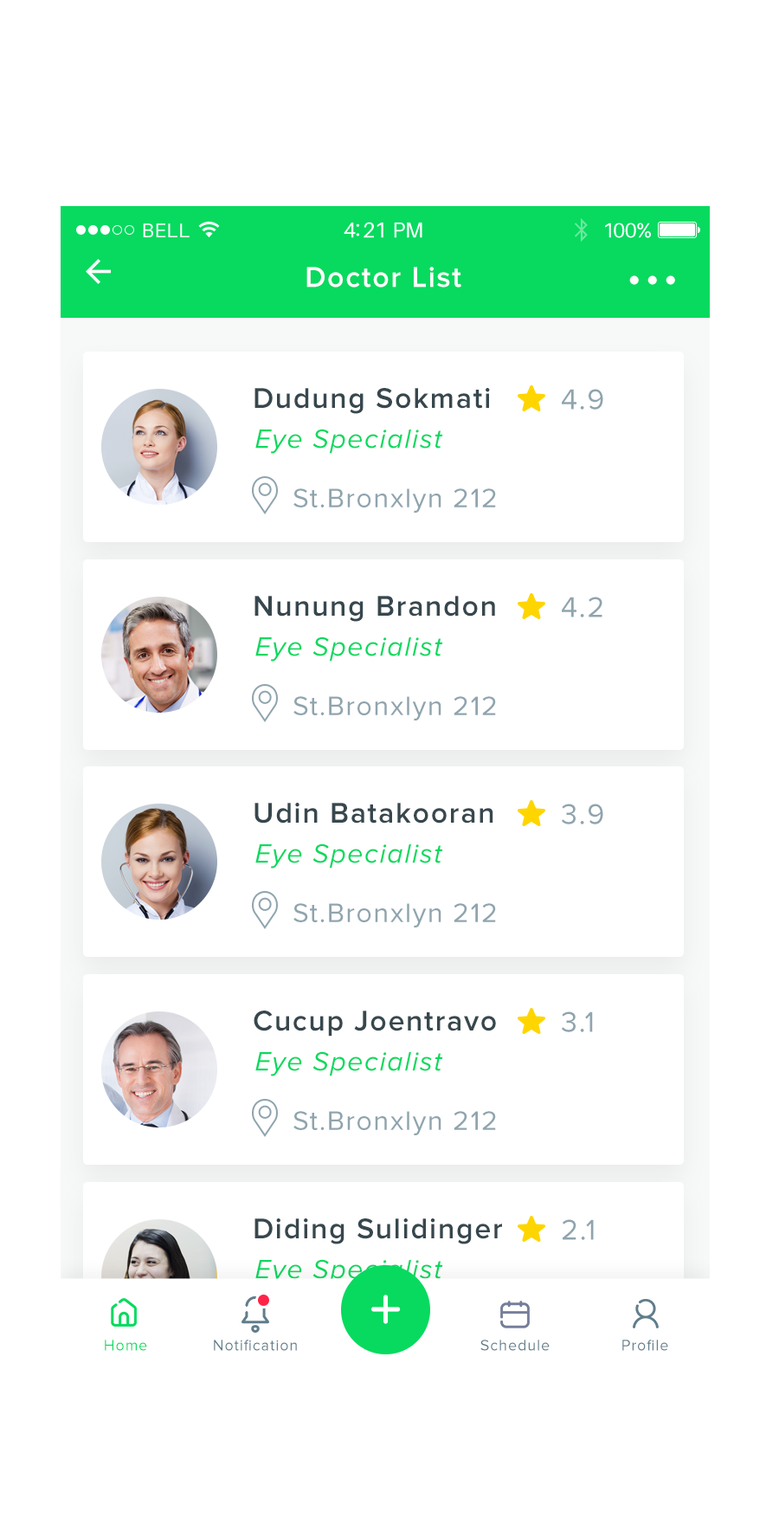
<style>
.page{position:relative;width:779px;height:1531px;background:#ffffff}
.page>*{position:absolute;margin:0}
.t1{font:29.4px "ProximaNova-Semibold";letter-spacing:0.05em;color:#ffffff}
.t2{font:61.5px "ProximaNova-Semibold";letter-spacing:0.05em;color:#ffffff}
.t3{font:29.4px "ProximaNova-Semibold";letter-spacing:0.05em;color:#37474e}
.t4{font:29.4px "ProximaNova-Regular";letter-spacing:0.05em;color:#8fa4ae}
.t5{font:27.7px "ProximaNova-RegularIt";letter-spacing:0.05em;color:#07da5f}
.t6{font:27.7px "ProximaNova-Regular";letter-spacing:0.05em;color:#8fa4ae}
.t7{font:58.7px "Nunito-SemiBold";letter-spacing:0.05em;color:#ffffff}
.t8{font:15.6px "ProximaNova-Regular";letter-spacing:0.05em;color:#07da5f}
.t9{font:15.6px "ProximaNova-Regular";letter-spacing:0.05em;color:#607d8b}
</style>
<div class="page">
<p class="t1" style="left:306px;top:267px;width:155px;height:20px">Doctor List</p>
<p class="t2" style="left:629px;top:275px;width:46px;height:10px">...</p>
<p class="t3" style="left:255px;top:388px;width:235px;height:26px">Dudung Sokmati</p>
<p class="t4" style="left:562px;top:389px;width:41px;height:20px">4.9</p>
<p class="t5" style="left:255px;top:429px;width:188px;height:25px">Eye Specialist</p>
<p class="t6" style="left:293px;top:488px;width:203px;height:24px">St.Bronxlyn 212</p>
<p class="t3" style="left:255px;top:596px;width:240px;height:26px">Nunung Brandon</p>
<p class="t4" style="left:562px;top:596px;width:41px;height:21px">4.2</p>
<p class="t5" style="left:255px;top:636px;width:188px;height:25px">Eye Specialist</p>
<p class="t6" style="left:293px;top:696px;width:203px;height:24px">St.Bronxlyn 212</p>
<p class="t3" style="left:255px;top:802px;width:238px;height:21px">Udin Batakooran</p>
<p class="t4" style="left:562px;top:803px;width:41px;height:21px">3.9</p>
<p class="t5" style="left:255px;top:843px;width:188px;height:25px">Eye Specialist</p>
<p class="t6" style="left:293px;top:903px;width:203px;height:24px">St.Bronxlyn 212</p>
<p class="t3" style="left:254px;top:1010px;width:242px;height:26px">Cucup Joentravo</p>
<p class="t4" style="left:562px;top:1011px;width:31px;height:21px">3.1</p>
<p class="t5" style="left:255px;top:1051px;width:188px;height:25px">Eye Specialist</p>
<p class="t6" style="left:293px;top:1111px;width:203px;height:24px">St.Bronxlyn 212</p>
<p class="t3" style="left:255px;top:1218px;width:247px;height:26px">Diding Sulidinger</p>
<p class="t4" style="left:563px;top:1219px;width:31px;height:21px">2.1</p>
<p class="t5" style="left:255px;top:1259px;width:188px;height:25px">Eye Specialist</p>
<p class="t7" style="left:371px;top:1294px;width:30px;height:30px">+</p>
<p class="t8" style="left:105px;top:1339px;width:42px;height:11px">Home</p>
<p class="t9" style="left:214px;top:1339px;width:83px;height:11px">Notification</p>
<p class="t9" style="left:480px;top:1339px;width:70px;height:11px">Schedule</p>
<p class="t9" style="left:622px;top:1339px;width:46px;height:11px">Profile</p>
</div>
